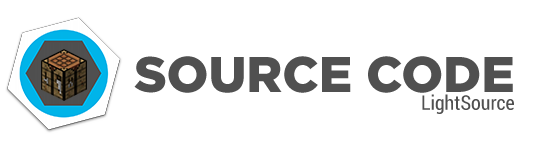
<style>
.page{position:relative;width:540px;height:150px;background:#ffffff}
.page>*{position:absolute;margin:0}
.t1{font:50px "GothamPro-Black";color:#505050}
.t2{font:20px "RobotoCondensed-Regular";color:#505050}
</style>
<div class="page">
<p class="t1" style="left:134px;top:56px;width:379px;height:37px">SOURCE CODE</p>
<p class="t2" style="left:422px;top:94px;width:92px;height:20px">LightSource</p>
</div>
